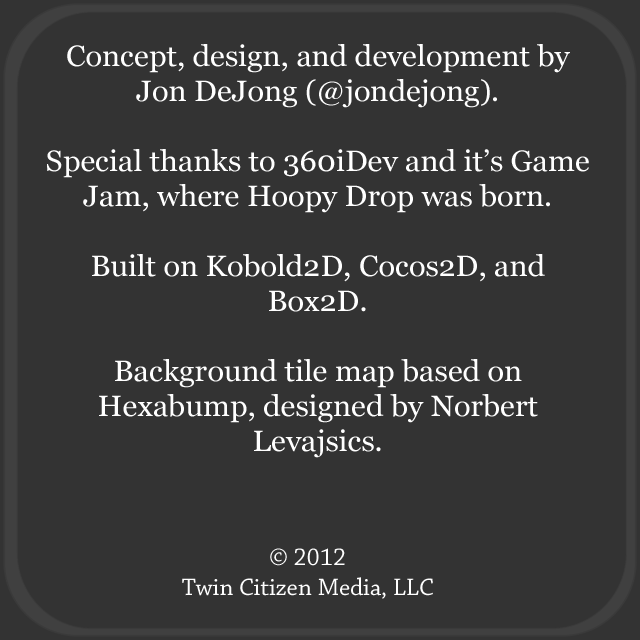
<style>
.page{position:relative;width:640px;height:640px;background:#333333}
.page>*{position:absolute;margin:0}
.t1{font:29.2px "Georgia";color:#ffffff;scale:1.05 1}
.t2{font:25px "ChaparralPro-Regular";color:#ffffff}
</style>
<div class="page">
<p class="t1" style="left:47px;top:44px;width:542px;height:414px;text-align:center">Concept, design, and development by Jon DeJong (@jondejong).<br><br>Special thanks to 360iDev and it’s Game Jam, where Hoopy Drop was born.<br><br>Built on Kobold2D, Cocos2D, and Box2D.<br><br>Background tile map based on Hexabump, designed by Norbert Levajsics.</p>
<p class="t2" style="left:182px;top:548px;width:251px;height:51px;text-align:center">© 2012<br>Twin Citizen Media, LLC</p>
</div>
